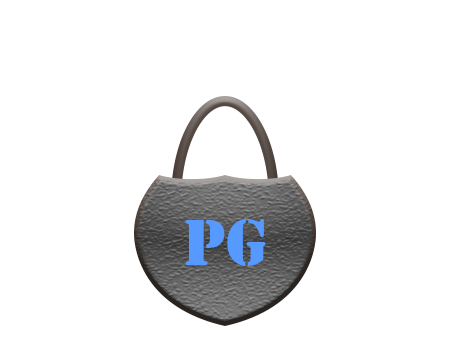
<style>
.page{position:relative;width:450px;height:350px;background:#ffffff}
.page>*{position:absolute;margin:0}
.t1{font:66.7px "Stencil";color:#569aff}
</style>
<div class="page">
<p class="t1" style="left:185px;top:219px;width:81px;height:47px">PG</p>
</div>
